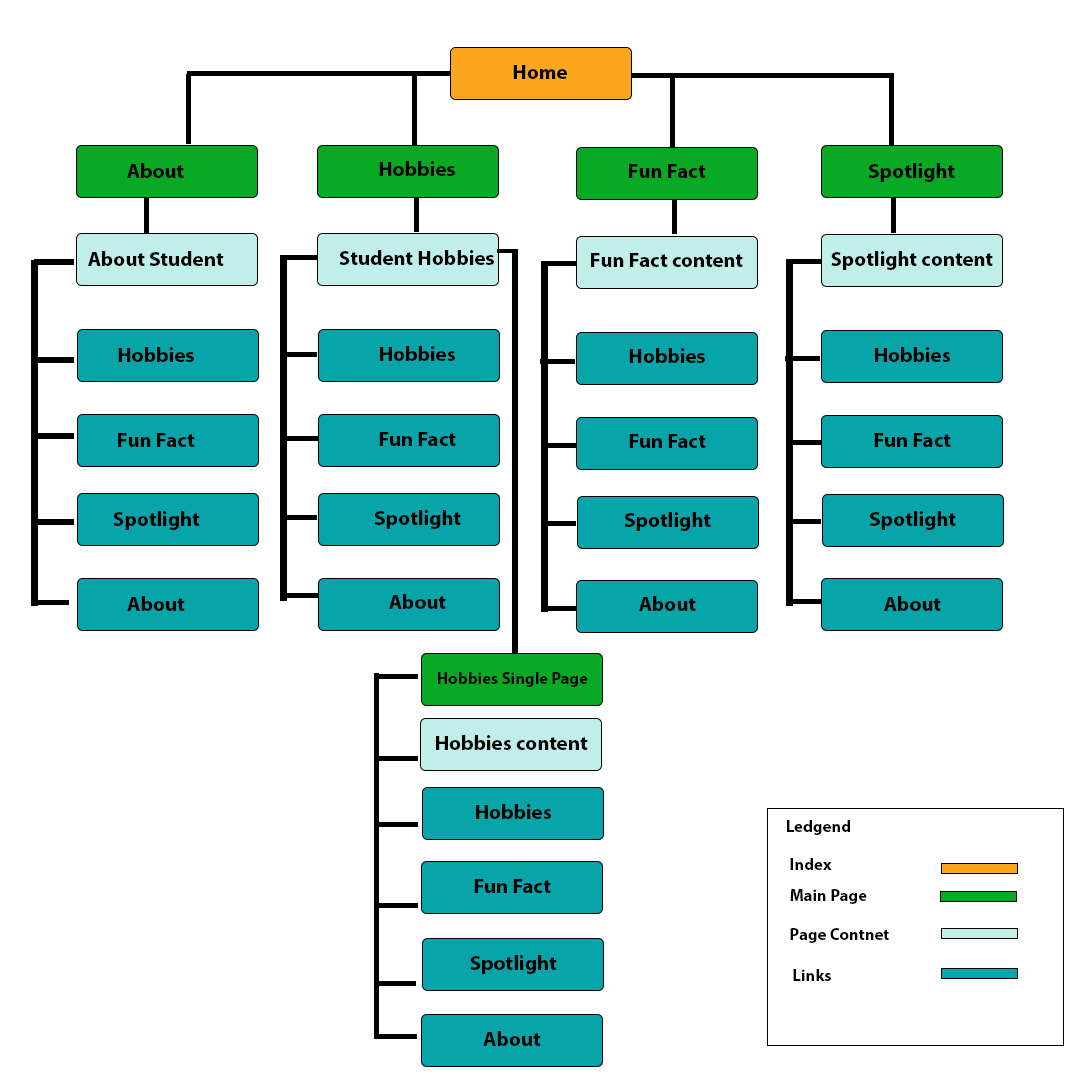
<style>
.page{position:relative;width:1080px;height:1080px;background:#ffffff}
.page>*{position:absolute;margin:0}
.t1{font:20.8px "MyriadPro-Bold";color:#000000}
.t2{font:16.7px "MyriadPro-Bold";color:#000000}
</style>
<div class="page">
<p class="t1" style="left:513px;top:65px;width:54px;height:14px">Home</p>
<p class="t1" style="left:379px;top:161px;width:76px;height:15px">Hobbies</p>
<p class="t1" style="left:127px;top:163px;width:57px;height:15px">About</p>
<p class="t1" style="left:629px;top:164px;width:77px;height:14px">Fun Fact</p>
<p class="t1" style="left:868px;top:163px;width:87px;height:19px">Spotlight</p>
<p class="t1" style="left:88px;top:251px;width:136px;height:15px">About Student</p>
<p class="t1" style="left:339px;top:250px;width:155px;height:15px">Student Hobbies</p>
<p class="t1" style="left:591px;top:253px;width:152px;height:14px">Fun Fact content</p>
<p class="t1" style="left:831px;top:251px;width:162px;height:19px">Spotlight content</p>
<p class="t1" style="left:118px;top:347px;width:76px;height:15px">Hobbies</p>
<p class="t1" style="left:380px;top:346px;width:75px;height:15px">Hobbies</p>
<p class="t1" style="left:629px;top:348px;width:76px;height:15px">Hobbies</p>
<p class="t1" style="left:875px;top:347px;width:75px;height:15px">Hobbies</p>
<p class="t1" style="left:118px;top:433px;width:77px;height:14px">Fun Fact</p>
<p class="t1" style="left:379px;top:432px;width:77px;height:14px">Fun Fact</p>
<p class="t1" style="left:629px;top:434px;width:77px;height:14px">Fun Fact</p>
<p class="t1" style="left:874px;top:433px;width:77px;height:14px">Fun Fact</p>
<p class="t1" style="left:374px;top:510px;width:87px;height:19px">Spotlight</p>
<p class="t1" style="left:113px;top:511px;width:87px;height:19px">Spotlight</p>
<p class="t1" style="left:624px;top:512px;width:87px;height:19px">Spotlight</p>
<p class="t1" style="left:869px;top:511px;width:87px;height:19px">Spotlight</p>
<p class="t1" style="left:127px;top:596px;width:58px;height:15px">About</p>
<p class="t1" style="left:389px;top:594px;width:57px;height:15px">About</p>
<p class="t1" style="left:639px;top:596px;width:57px;height:15px">About</p>
<p class="t1" style="left:884px;top:596px;width:57px;height:15px">About</p>
<p class="t2" style="left:438px;top:672px;width:150px;height:15px">Hobbies Single Page</p>
<p class="t1" style="left:436px;top:735px;width:152px;height:15px">Hobbies content</p>
<p class="t1" style="left:476px;top:804px;width:75px;height:15px">Hobbies</p>
<p class="t2" style="left:787px;top:820px;width:63px;height:15px">Ledgend</p>
<p class="t2" style="left:790px;top:858px;width:42px;height:12px">Index</p>
<p class="t1" style="left:474px;top:879px;width:77px;height:14px">Fun Fact</p>
<p class="t2" style="left:790px;top:889px;width:77px;height:15px">Main Page</p>
<p class="t2" style="left:790px;top:928px;width:99px;height:15px">Page Contnet</p>
<p class="t1" style="left:470px;top:955px;width:87px;height:19px">Spotlight</p>
<p class="t2" style="left:793px;top:969px;width:38px;height:12px">Links</p>
<p class="t1" style="left:483px;top:1031px;width:58px;height:15px">About</p>
</div>
